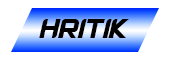
<style>
.page{position:relative;width:170px;height:60px;background:#ffffff}
.page>*{position:absolute;margin:0}
.t1{font:29.4px "Spantaran";color:#020000}
</style>
<div class="page">
<p class="t1" style="left:39px;top:19px;width:90px;height:19px">HRITIK</p>
</div>
